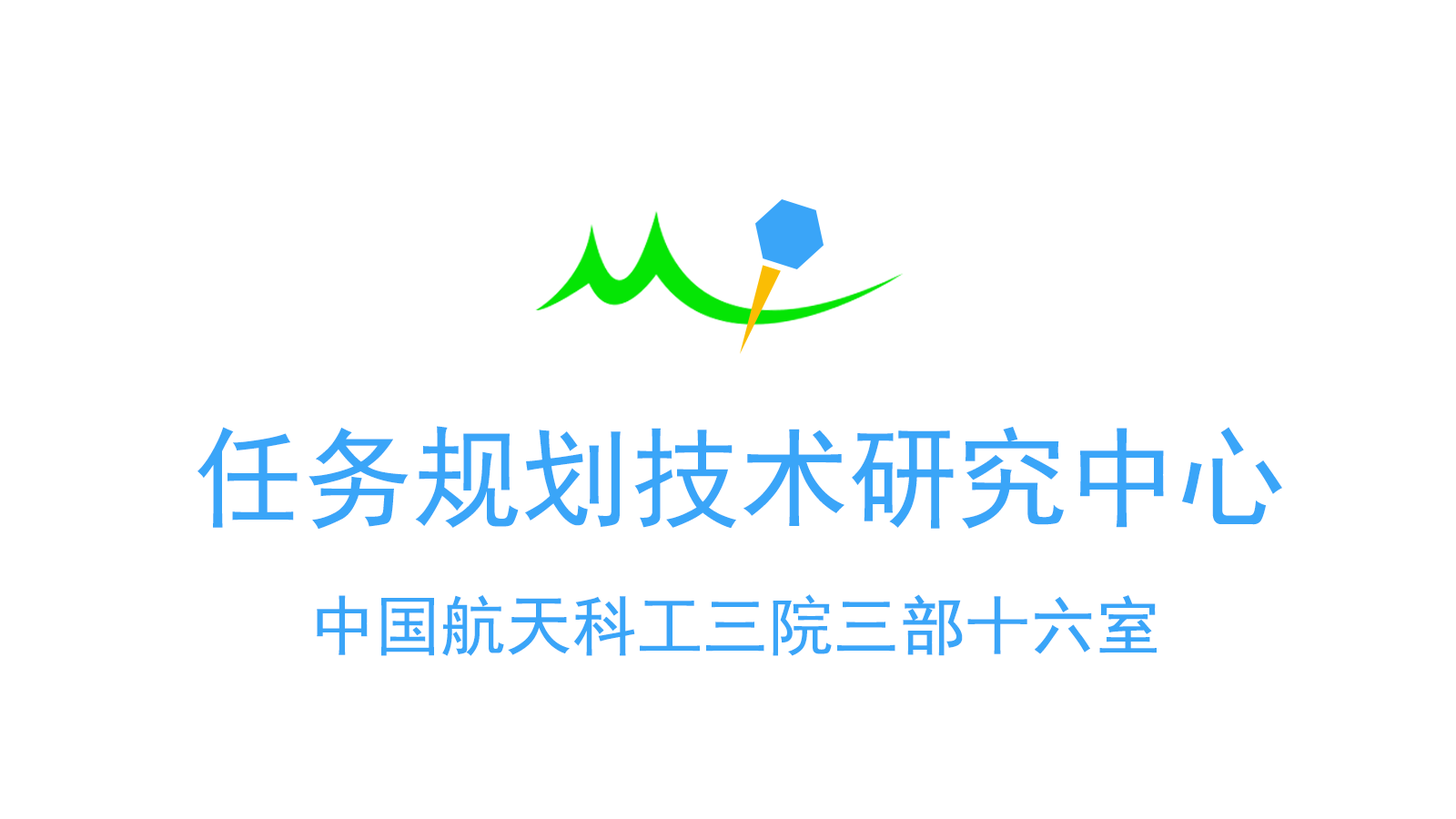
<style>
.page{position:relative;width:1456px;height:819px;background:#ffffff}
.page>*{position:absolute;margin:0}
.t1{font:109.2px "SimHei";color:#3aa5f8}
.t2{font:65.5px "SimHei";color:#3aa5f8}
</style>
<div class="page">
<p class="t1" style="left:197px;top:426px;width:1085px;height:104px">任务规划技术研究中心</p>
<p class="t2" style="left:317px;top:594px;width:840px;height:62px">中国航天科工三院三部十六室</p>
</div>
